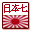
<style>
.page{position:relative;width:33px;height:32px;background:#ffffff}
.page>*{position:absolute;margin:0}
.t1{font:10.4px "SimSun";letter-spacing:-0.25em;color:#ae0012}
</style>
<div class="page">
<p class="t1" style="left:4px;top:4px;width:24px;height:9px">日本七</p>
</div>
